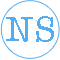
<style>
.page{position:relative;width:60px;height:60px;background:#ffffff}
.page>*{position:absolute;margin:0}
.t1{font:36px "AmericanTypewriter";color:#55acee}
</style>
<div class="page">
<p class="t1" style="left:6px;top:16px;width:48px;height:26px">NS</p>
</div>
